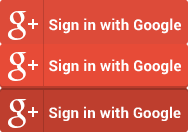
<style>
.page{position:relative;width:188px;height:132px;background:#e74b37}
.page>*{position:absolute;margin:0}
.t1{font:15px "Roboto-Bold";letter-spacing:0.01em;color:#ffffff}
.t2{font:15px "Roboto-Bold";letter-spacing:0.05em;color:#ffffff}
</style>
<div class="page">
<p class="t1" style="left:49px;top:18px;width:132px;height:16px">Sign in with Googl<span class="t2">e</span></p>
<p class="t1" style="left:49px;top:59px;width:132px;height:16px">Sign in with Googl<span class="t2">e</span></p>
<p class="t1" style="left:49px;top:106px;width:132px;height:15px">Sign in with Googl<span class="t2">e</span></p>
</div>
